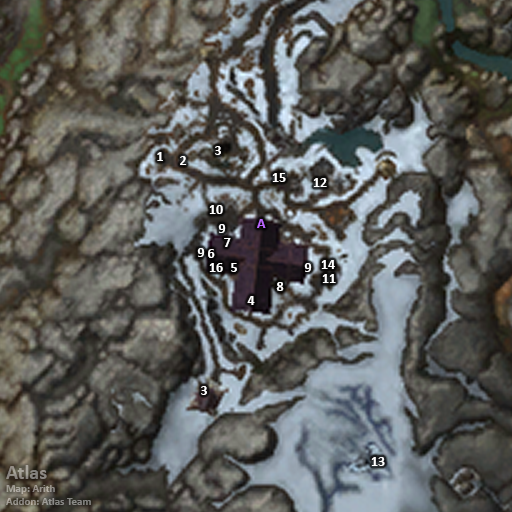
<style>
.page{position:relative;width:512px;height:512px}
.page>*{position:absolute;margin:0}
.t1{font:14px "Calibri-Bold";color:#ffffff}
.t2{font:14px "Calibri-Bold";color:#bb66ff}
.t3{font:11px "Calibri-Bold";color:#918c87}
.t4{font:20px "Calibri-Bold";color:#918c87}
</style>
<div class="page">
<p class="t1" style="left:215px;top:146px;width:6px;height:9px">3</p>
<p class="t1" style="left:157px;top:152px;width:6px;height:9px">1</p>
<p class="t1" style="left:180px;top:156px;width:7px;height:9px">2</p>
<p class="t1" style="left:272px;top:173px;width:14px;height:9px">15</p>
<p class="t1" style="left:313px;top:178px;width:14px;height:9px">12</p>
<p class="t1" style="left:209px;top:205px;width:14px;height:9px">10</p>
<p class="t2" style="left:257px;top:219px;width:9px;height:9px">A</p>
<p class="t1" style="left:218px;top:224px;width:8px;height:9px">9</p>
<p class="t1" style="left:224px;top:238px;width:7px;height:9px">7</p>
<p class="t1" style="left:197px;top:248px;width:8px;height:9px">9</p>
<p class="t1" style="left:208px;top:249px;width:7px;height:9px">6</p>
<p class="t1" style="left:209px;top:263px;width:14px;height:9px">16</p>
<p class="t1" style="left:231px;top:263px;width:6px;height:9px">5</p>
<p class="t1" style="left:304px;top:263px;width:8px;height:9px">9</p>
<p class="t1" style="left:321px;top:260px;width:14px;height:9px">14</p>
<p class="t1" style="left:322px;top:274px;width:14px;height:9px">11</p>
<p class="t1" style="left:276px;top:282px;width:8px;height:9px">8</p>
<p class="t1" style="left:247px;top:296px;width:8px;height:9px">4</p>
<p class="t1" style="left:201px;top:386px;width:6px;height:9px">3</p>
<p class="t1" style="left:371px;top:457px;width:14px;height:9px">13</p>
<p class="t3" style="left:6px;top:465px;width:85px;height:40px"><span class="t4">Atlas<br></span>Map: Arith<br>Addon: Atlas Team</p>
</div>
